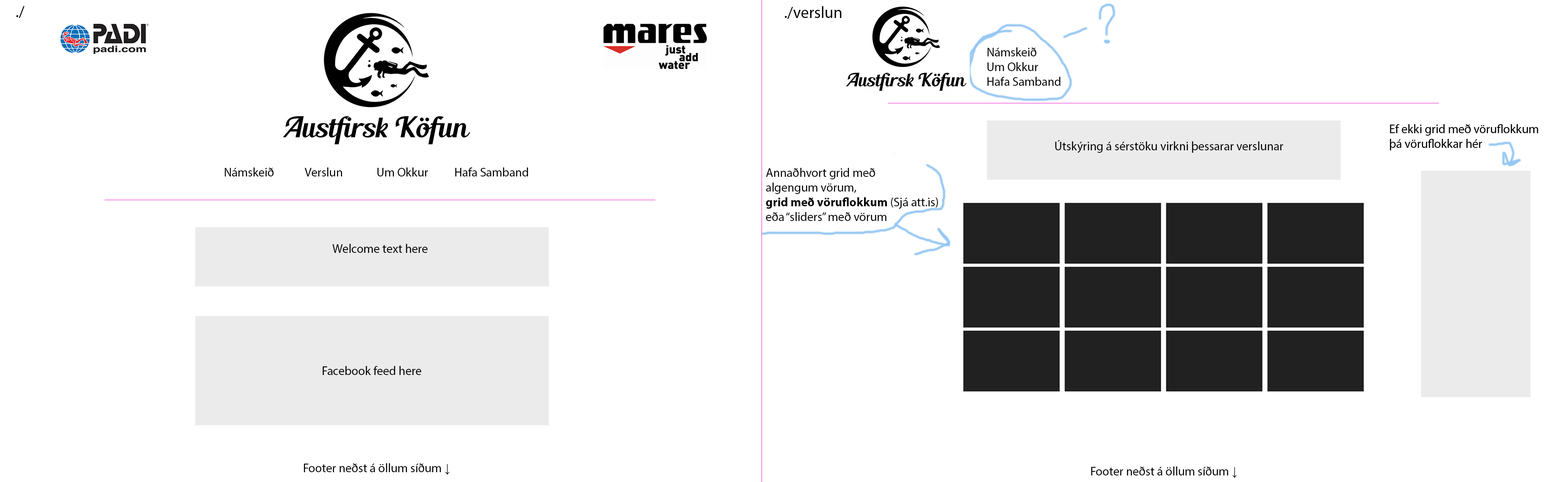
<style>
.page{position:relative;width:1568px;height:482px;background:#ffffff}
.page>*{position:absolute;margin:0}
.t1{font:16.3px "MyriadPro-Regular";color:#000000}
.t2{font:12.2px/14.7px "MyriadPro-Regular";color:#000000}
.t3{font:12.2px "MyriadPro-Regular";color:#000000}
.t4{font:12.2px "MyriadPro-Bold";color:#000000}
.t5{font:12.2px "TimesNewRomanPSMT";color:#000000}
</style>
<div class="page">
<p class="t1" style="left:16px;top:6px;width:8px;height:12px">./</p>
<p class="t1" style="left:785px;top:6px;width:57px;height:13px">./verslun</p>
<p class="t2" style="left:987px;top:47px;width:73px;height:39px">Námskeið <br>Um Okkur <br>Hafa Samband</p>
<p class="t3" style="left:1055px;top:140px;width:228px;height:13px">Útskýring á sérstöku virkni þessarar verslunar</p>
<p class="t3" style="left:225px;top:167px;width:303px;height:9px">Námskeið            Verslun             Um Okkur          Hafa Samband</p>
<p class="t3" style="left:766px;top:168px;width:172px;height:53px">Annaðhvort grid með <br>algengum vörum, <br><span class="t4">grid með vöruflokkum</span> (Sjá att.is)<br>eða “sliders” með vörum</p>
<p class="t3" style="left:332px;top:244px;width:96px;height:9px">Welcome text here</p>
<p class="t3" style="left:323px;top:366px;width:98px;height:9px">Facebook feed here</p>
<p class="t3" style="left:304px;top:463px;width:146px;height:11px">Footer neðst á öllum síðum <span class="t5">↓</span></p>
<p class="t3" style="left:1091px;top:466px;width:146px;height:12px">Footer neðst á öllum síðum <span class="t5">↓</span></p>
</div>
